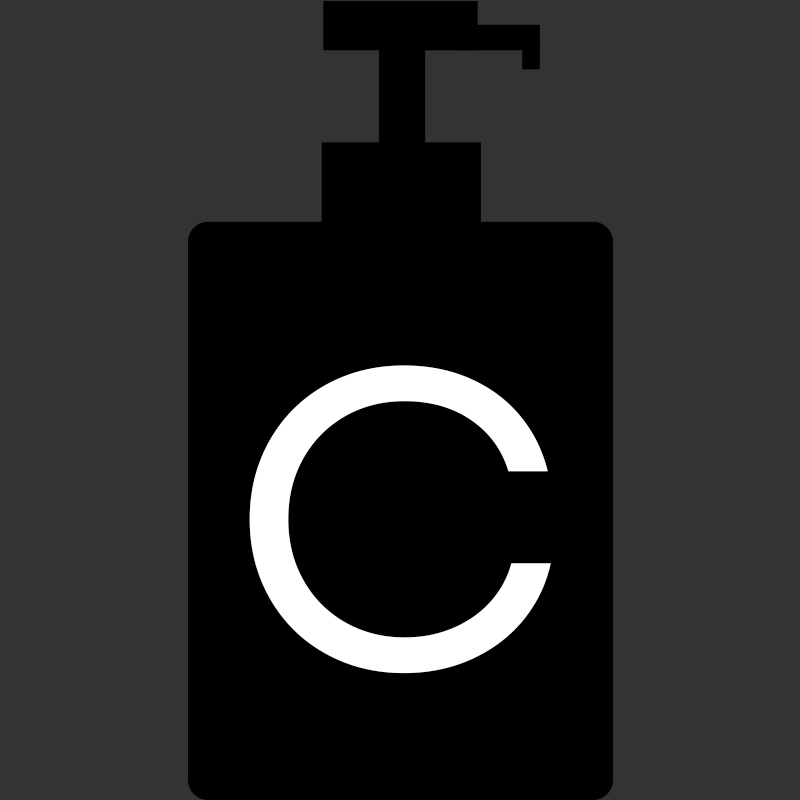
<style>
.page{position:relative;width:800px;height:800px;background:#333333}
.page>*{position:absolute;margin:0}
.t1{font:367.1px "GmarketSansTTFMedium";letter-spacing:0.05em;color:#ffffff}
</style>
<div class="page">
<p class="t1" style="left:249px;top:365px;width:302px;height:309px">C</p>
</div>
